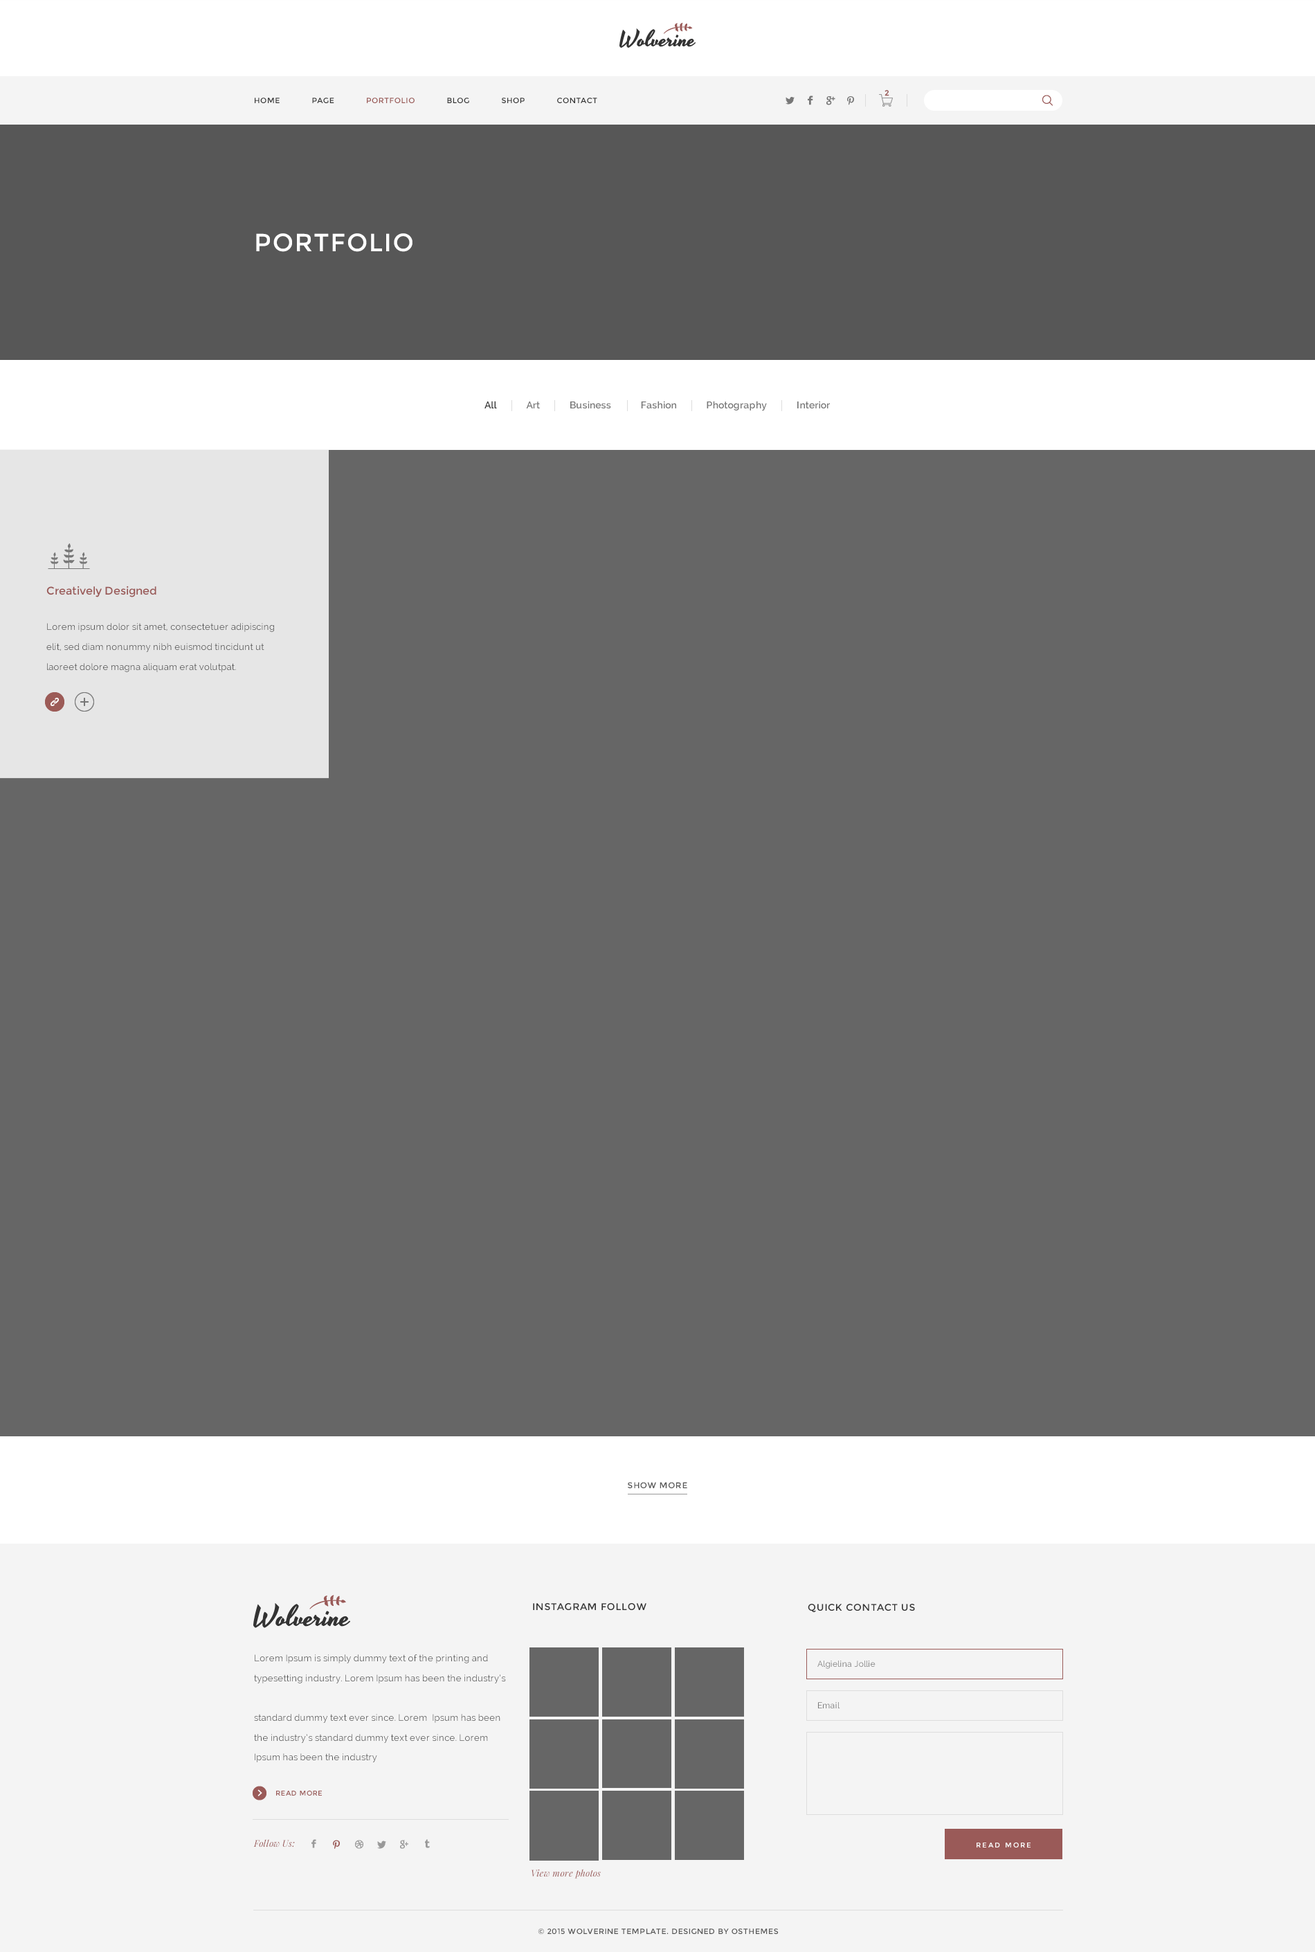
<style>
.page{position:relative;width:1315px;height:1952px;background:#666666}
.page>*{position:absolute;margin:0}
.t1{font:7.6px "Montserrat-Regular";letter-spacing:0.05em;color:#333333}
.t2{font:7.6px "Montserrat-Regular";letter-spacing:0.05em;color:#9b5a57}
.t3{font:7.6px "Montserrat-Regular";color:#9a5a58;font-weight:bold}
.t4{font:24.9px "Montserrat-Regular";letter-spacing:0.05em;color:#ffffff}
.t5{font:9.7px "Raleway-SemiBold";letter-spacing:0.02em;color:#777777}
.t6{font:9.7px "Raleway-SemiBold";letter-spacing:0.02em;color:#333333}
.t7{font:11.1px "Montserrat-Regular";color:#9a5a58}
.t8{font:9px/19.8px "Raleway";letter-spacing:0.02em;color:#535353}
.t9{font:8.3px "Montserrat-Regular";letter-spacing:0.05em;color:#555555}
.t10{font:9.7px "Montserrat-Regular";letter-spacing:0.05em;color:#333333}
.t11{font:9px/19.8px "Raleway";letter-spacing:0.02em;color:#555555}
.t12{font:8.3px "Raleway";letter-spacing:0.02em;color:#777777}
.t13{font:6.9px "Montserrat-Regular";letter-spacing:0.05em;color:#9a5a58}
.t14{font:9px "PlayfairDisplay-Italic";letter-spacing:0.02em;color:#995958}
.t15{font:6.9px "Montserrat-Regular";letter-spacing:0.2em;color:#ffffff}
.t16{font:9px "PlayfairDisplay-Italic";letter-spacing:0.02em;color:#9a5a58}
.t17{font:7.6px "Montserrat-Regular";letter-spacing:0.05em;color:#555555}
</style>
<div class="page">
<p class="t1" style="left:255px;top:98px;width:342px;height:5px">HOME      PAGE      <span class="t2">PORTFOLIO</span>      BLOG      SHOP      CONTACT</p>
<p class="t3" style="left:885px;top:90px;width:5px;height:6px">2</p>
<p class="t4" style="left:256px;top:233px;width:157px;height:19px">PORTFOLIO</p>
<p class="t5" style="left:485px;top:401px;width:345px;height:10px"><span class="t6">All</span>             Art             Business             Fashion             Photography             Interior</p>
<p class="t7" style="left:46px;top:586px;width:110px;height:11px">Creatively Designed</p>
<p class="t8" style="left:46px;top:623px;width:228px;height:49px">Lorem ipsum dolor sit amet, consectetuer adipiscing elit, sed diam nonummy nibh euismod tincidunt ut laoreet dolore magna aliquam erat volutpat.</p>
<p class="t9" style="left:628px;top:1482px;width:59px;height:6px">SHOW MORE</p>
<p class="t10" style="left:533px;top:1603px;width:114px;height:7px">INSTAGRAM FOLLOW</p>
<p class="t10" style="left:808px;top:1604px;width:107px;height:8px">QUICK CONTACT US</p>
<p class="t11" style="left:254px;top:1655px;width:252px;height:108px">Lorem Ipsum is simply dummy text of the printing and typesetting industry. Lorem Ipsum has been the industry’s <br> <br>standard dummy text ever since. Lorem  Ipsum has been the industry’s standard dummy text ever since. Lorem  Ipsum has been the industry</p>
<p class="t12" style="left:818px;top:1661px;width:58px;height:8px">Algielina Jollie</p>
<p class="t12" style="left:818px;top:1702px;width:22px;height:7px">Email</p>
<p class="t13" style="left:276px;top:1790px;width:46px;height:6px">READ MORE</p>
<p class="t14" style="left:253px;top:1839px;width:42px;height:9px">Follow Us:</p>
<p class="t15" style="left:977px;top:1842px;width:54px;height:6px">READ MORE</p>
<p class="t16" style="left:532px;top:1869px;width:69px;height:10px">View more photos</p>
<p class="t17" style="left:538px;top:1929px;width:241px;height:6px">© 2015 WOLVERINE TEMPLATE. DESIGNED BY OSTHEMES</p>
</div>
